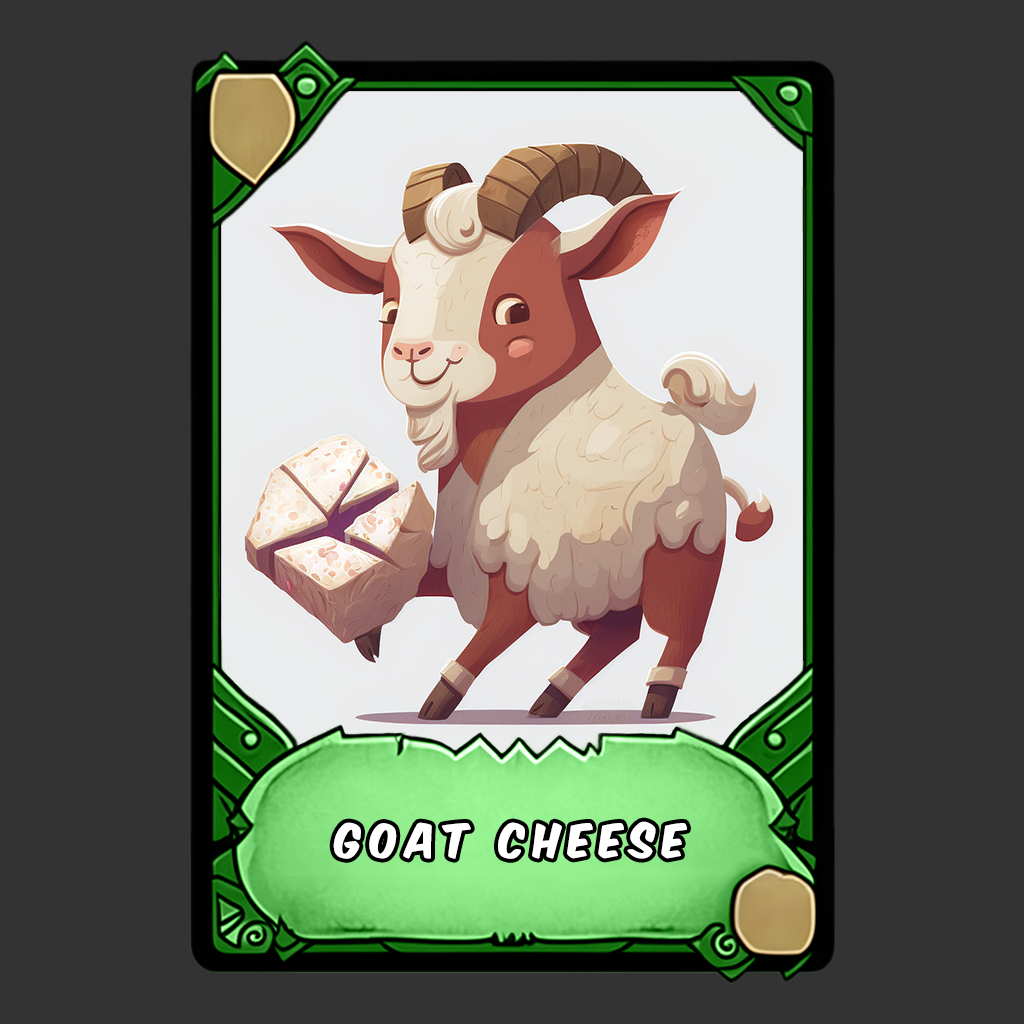
<style>
.page{position:relative;width:1024px;height:1024px;background:#333333}
.page>*{position:absolute;margin:0}
.t1{font:40px "KomikaAxis";letter-spacing:0.2em;color:#ffffff}
</style>
<div class="page">
<p class="t1" style="left:333px;top:821px;width:354px;height:38px">goat cheese</p>
</div>
